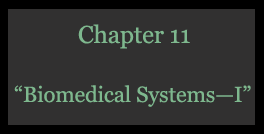
<style>
.page{position:relative;width:264px;height:134px;background:#313030}
.page>*{position:absolute;margin:0}
.t1{font:24.5px "Georgia";letter-spacing:-0.005em;color:#7eb88e}
.t2{font:22px "Georgia";letter-spacing:-0.005em;color:#7eb88e}
</style>
<div class="page">
<p class="t1" style="left:78px;top:24px;width:112px;height:25px">Chapter 11</p>
<p class="t2" style="left:14px;top:85px;width:237px;height:22px">“Biomedical Systems—I”</p>
</div>
